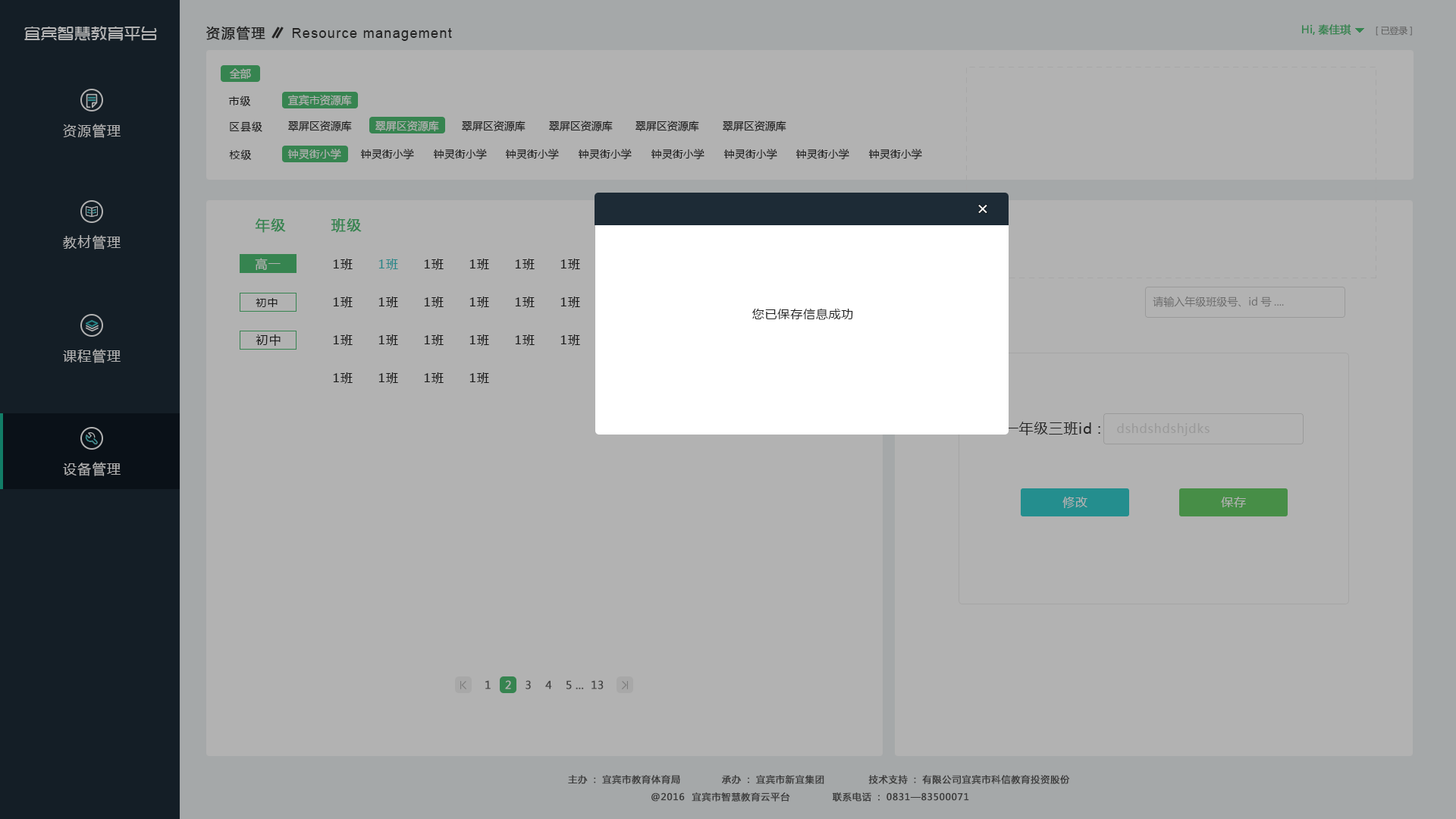
<style>
.page{position:relative;width:1456px;height:819px;background:#b2b2b2}
.page>*{position:absolute;margin:0}
.t1{font:16.7px "TRENDS";color:#b2b2b2}
.t2{font:13.6px "MicrosoftYaHei";letter-spacing:0.075em;color:#333333;font-weight:bold}
.t3{font:13.6px "ArialMT";letter-spacing:0.075em;color:#333333}
.t4{font:10.6px "MicrosoftYaHei";color:#368450;font-weight:bold}
.t5{font:9.1px "MicrosoftYaHei";letter-spacing:-0.01em;color:#5e5e5e}
.t6{font:10.6px "MicrosoftYaHei";color:#b2b2b2}
.t7{font:10.6px "MicrosoftYaHei";letter-spacing:0.075em;color:#222222}
.t8{font:13.6px "MicrosoftYaHei";letter-spacing:0.075em;color:#b2b2b2}
.t9{font:10.6px "MicrosoftYaHei";color:#222222}
.t10{font:18.2px "MicrosoftYaHei";letter-spacing:0.05em;color:#ffffff}
.t11{font:14.2px "MicrosoftYaHei";letter-spacing:0.075em;color:#368450;font-weight:bold}
.t12{font:12.1px "MicrosoftYaHei";letter-spacing:0.075em;color:#b2b2b2}
.t13{font:12.1px "MicrosoftYaHei";letter-spacing:0.075em;color:#222222}
.t14{font:12.1px "MicrosoftYaHei";letter-spacing:0.075em;color:#298789}
.t15{font:10.6px "MicrosoftYaHei";color:#6b6b6b}
.t16{font:12.1px "MicrosoftYaHei";letter-spacing:0.05em;color:#222222}
.t17{font:14.2px "MicrosoftYaHei";letter-spacing:0.05em;color:#333333}
.t18{font:12.1px "MicrosoftYaHei";letter-spacing:0.05em;color:#9a9a9a}
.t19{font:12.1px "MicrosoftYaHei";letter-spacing:0.05em;color:#b2b2b2}
.t20{font:10.6px "MicrosoftYaHei";color:#474747;font-weight:bold}
.t21{font:9.1px "MicrosoftYaHei";letter-spacing:0.05em;color:#3b3b3b;font-weight:bold}
</style>
<div class="page">
<p class="t1" style="left:24px;top:26px;width:133px;height:15px">宜宾智慧教育平台</p>
<p class="t2" style="left:206px;top:26px;width:59px;height:14px">资源管理</p>
<p class="t3" style="left:292px;top:28px;width:160px;height:13px">Resource management</p>
<p class="t4" style="left:1302px;top:24px;width:49px;height:11px">Hi,秦佳琪</p>
<p class="t5" style="left:1376px;top:26px;width:36px;height:10px">[已登录]</p>
<p class="t6" style="left:230px;top:68px;width:21px;height:11px">全部</p>
<p class="t7" style="left:228px;top:96px;width:23px;height:10px">市级</p>
<p class="t6" style="left:287px;top:95px;width:65px;height:11px">宜宾市资源库</p>
<p class="t8" style="left:63px;top:124px;width:58px;height:14px">资源管理</p>
<p class="t7" style="left:230px;top:121px;width:32px;height:11px">区县级</p>
<p class="t9" style="left:288px;top:121px;width:64px;height:11px">翠屏区资源库</p>
<p class="t6" style="left:375px;top:121px;width:64px;height:11px">翠屏区资源库</p>
<p class="t9" style="left:462px;top:121px;width:64px;height:11px">翠屏区资源库</p>
<p class="t9" style="left:549px;top:121px;width:64px;height:11px">翠屏区资源库</p>
<p class="t9" style="left:635px;top:121px;width:64px;height:11px">翠屏区资源库</p>
<p class="t9" style="left:723px;top:121px;width:63px;height:11px">翠屏区资源库</p>
<p class="t7" style="left:229px;top:149px;width:23px;height:11px">校级</p>
<p class="t6" style="left:287px;top:149px;width:54px;height:10px">钟灵街小学</p>
<p class="t9" style="left:360px;top:149px;width:54px;height:10px">钟灵街小学</p>
<p class="t9" style="left:433px;top:149px;width:54px;height:10px">钟灵街小学</p>
<p class="t9" style="left:505px;top:149px;width:54px;height:10px">钟灵街小学</p>
<p class="t9" style="left:578px;top:149px;width:54px;height:10px">钟灵街小学</p>
<p class="t9" style="left:651px;top:149px;width:53px;height:10px">钟灵街小学</p>
<p class="t9" style="left:723px;top:149px;width:54px;height:10px">钟灵街小学</p>
<p class="t9" style="left:795px;top:149px;width:54px;height:10px">钟灵街小学</p>
<p class="t9" style="left:868px;top:149px;width:54px;height:10px">钟灵街小学</p>
<p class="t10" style="left:978px;top:205px;width:9px;height:8px">×</p>
<p class="t11" style="left:255px;top:218px;width:31px;height:15px">年级</p>
<p class="t11" style="left:331px;top:218px;width:31px;height:15px">班级</p>
<p class="t8" style="left:63px;top:235px;width:58px;height:14px">教材管理</p>
<p class="t12" style="left:255px;top:258px;width:26px;height:13px">高一</p>
<p class="t13" style="left:333px;top:259px;width:20px;height:11px">1班</p>
<p class="t14" style="left:378px;top:259px;width:20px;height:11px">1班</p>
<p class="t13" style="left:424px;top:259px;width:20px;height:11px">1班</p>
<p class="t13" style="left:469px;top:259px;width:20px;height:11px">1班</p>
<p class="t13" style="left:515px;top:259px;width:20px;height:11px">1班</p>
<p class="t13" style="left:560px;top:259px;width:20px;height:11px">1班</p>
<p class="t7" style="left:256px;top:298px;width:22px;height:9px">初中</p>
<p class="t13" style="left:333px;top:297px;width:20px;height:11px">1班</p>
<p class="t13" style="left:378px;top:297px;width:20px;height:11px">1班</p>
<p class="t13" style="left:424px;top:297px;width:20px;height:11px">1班</p>
<p class="t13" style="left:469px;top:297px;width:20px;height:11px">1班</p>
<p class="t13" style="left:515px;top:297px;width:20px;height:11px">1班</p>
<p class="t13" style="left:560px;top:297px;width:20px;height:11px">1班</p>
<p class="t15" style="left:1153px;top:296px;width:131px;height:11px">请输入年级班级号、id号....</p>
<p class="t16" style="left:751px;top:308px;width:102px;height:12px">您已保存信息成功</p>
<p class="t13" style="left:256px;top:334px;width:25px;height:12px">初中</p>
<p class="t13" style="left:333px;top:334px;width:20px;height:12px">1班</p>
<p class="t13" style="left:378px;top:334px;width:20px;height:12px">1班</p>
<p class="t13" style="left:424px;top:334px;width:20px;height:12px">1班</p>
<p class="t13" style="left:469px;top:334px;width:20px;height:12px">1班</p>
<p class="t13" style="left:515px;top:334px;width:20px;height:12px">1班</p>
<p class="t13" style="left:560px;top:334px;width:20px;height:12px">1班</p>
<p class="t8" style="left:63px;top:349px;width:58px;height:14px">课程管理</p>
<p class="t13" style="left:333px;top:372px;width:20px;height:12px">1班</p>
<p class="t13" style="left:378px;top:372px;width:20px;height:12px">1班</p>
<p class="t13" style="left:424px;top:372px;width:20px;height:12px">1班</p>
<p class="t13" style="left:469px;top:372px;width:20px;height:12px">1班</p>
<p class="t17" style="left:1004px;top:422px;width:96px;height:13px">一年级三班id :</p>
<p class="t18" style="left:1117px;top:423px;width:93px;height:13px">dshdshdshjdks</p>
<p class="t8" style="left:63px;top:462px;width:58px;height:14px">设备管理</p>
<p class="t19" style="left:1062px;top:497px;width:25px;height:11px">修改</p>
<p class="t19" style="left:1221px;top:497px;width:25px;height:10px">保存</p>
<p class="t20" style="left:485px;top:680px;width:119px;height:9px">1    2    3    4    5 ...  13</p>
<p class="t21" style="left:568px;top:775px;width:112px;height:9px">主办：宜宾市教育体育局</p>
<p class="t21" style="left:722px;top:775px;width:102px;height:9px">承办：宜宾市新宜集团</p>
<p class="t21" style="left:868px;top:775px;width:202px;height:9px">技术支持：有限公司宜宾市科信教育投资股份</p>
<p class="t21" style="left:651px;top:792px;width:139px;height:10px">@2016  宜宾市智慧教育云平台</p>
<p class="t21" style="left:833px;top:792px;width:136px;height:10px">联系电话：0831—83500071</p>
</div>
